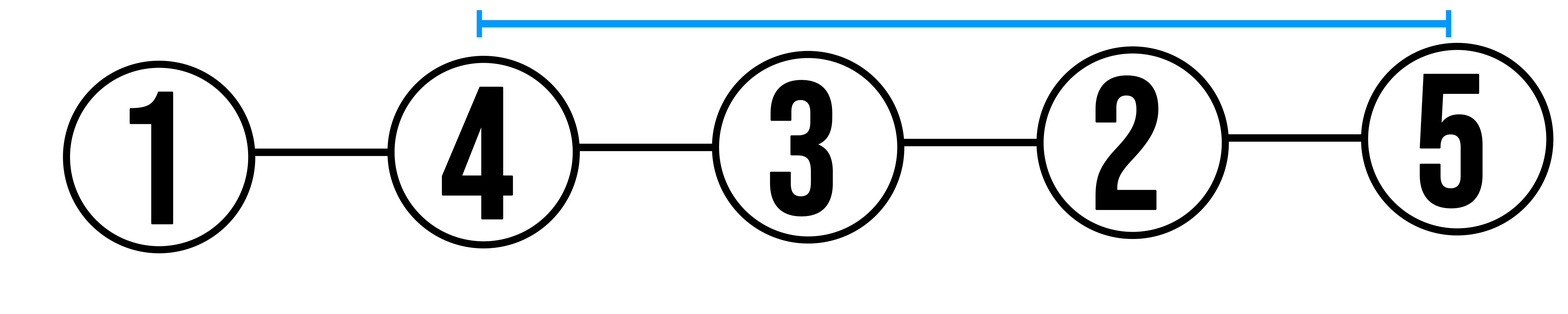
<style>
.page{position:relative;width:1568px;height:314px;background:#ffffff}
.page>*{position:absolute;margin:0}
.t1{font:187.4px "BebasNeue-Regular";letter-spacing:-0.03em;color:#000000;font-variant:small-caps;font-weight:bold}
</style>
<div class="page">
<p class="t1" style="left:1096px;top:75px;width:63px;height:135px">2</p>
<p class="t1" style="left:1420px;top:74px;width:63px;height:134px">5</p>
<p class="t1" style="left:442px;top:86px;width:71px;height:133px">4</p>
<p class="t1" style="left:770px;top:80px;width:63px;height:136px">3</p>
<p class="t1" style="left:130px;top:91px;width:43px;height:133px">1</p>
</div>
